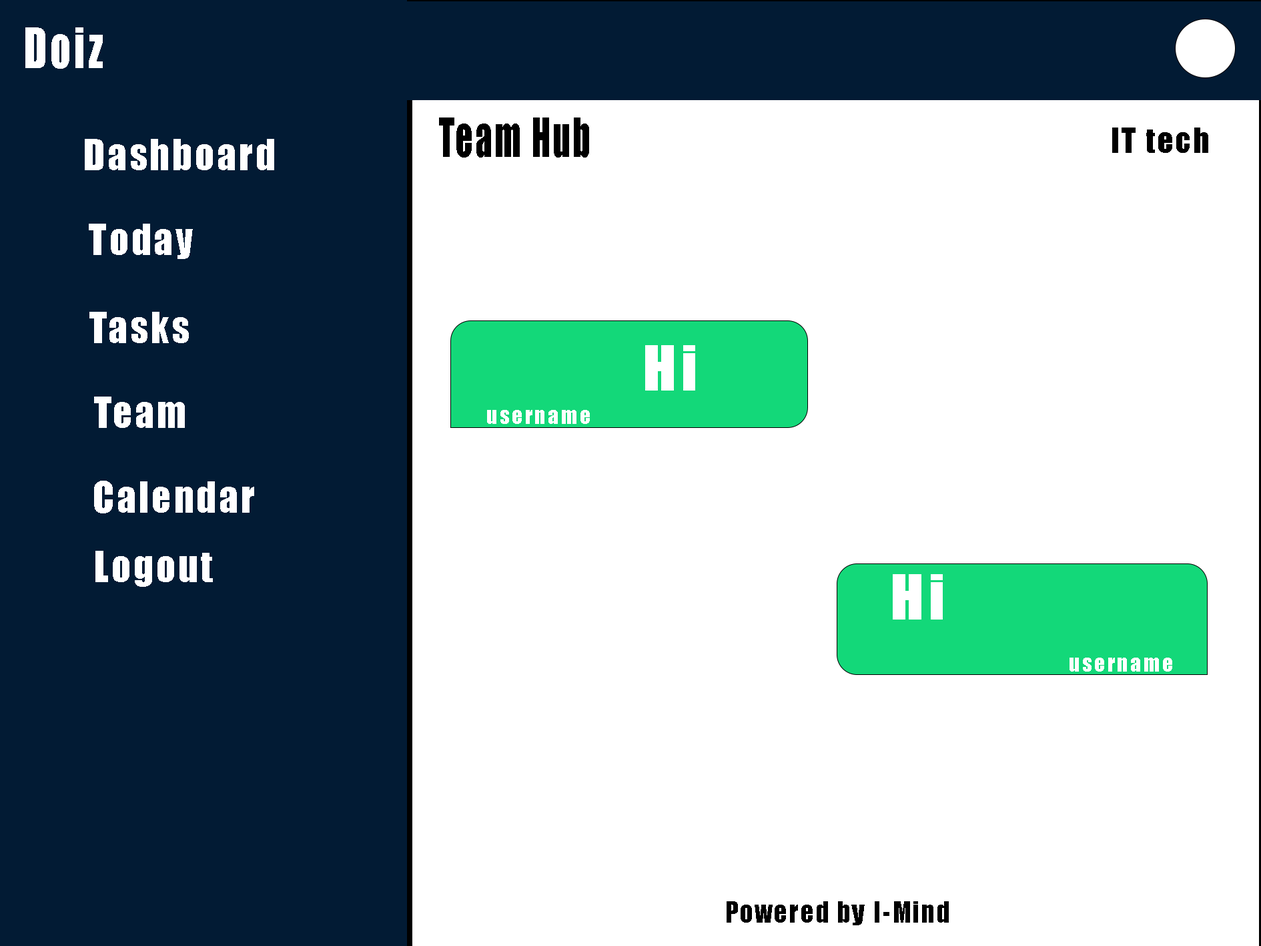
<style>
.page{position:relative;width:1261px;height:946px;background:#ffffff}
.page>*{position:absolute;margin:0}
.t1{font:51.6px "Impact";letter-spacing:0.075em;color:#ffffff;scale:0.8 1}
.t2{font:50px "Impact";letter-spacing:0.075em;color:#000000;scale:0.67 1}
.t3{font:32px "Impact";letter-spacing:0.075em;color:#000000;scale:0.96 1}
.t4{font:40.2px "Impact";letter-spacing:0.075em;color:#ffffff;scale:0.94 1}
.t5{font:57.2px "Impact";letter-spacing:0.075em;color:#ffffff;scale:1.05 1}
.t6{font:22.2px "Impact";letter-spacing:0.075em;color:#ffffff}
.t7{font:40.3px "Impact";letter-spacing:0.075em;color:#ffffff;scale:0.94 1}
.t8{font:27.1px "Impact";letter-spacing:0.075em;color:#000000;scale:0.95 1}
</style>
<div class="page">
<p class="t1" style="left:25px;top:27px;width:78px;height:42px">Doiz</p>
<p class="t2" style="left:439px;top:117px;width:150px;height:40px">Team Hub</p>
<p class="t3" style="left:1112px;top:127px;width:96px;height:26px">IT tech</p>
<p class="t4" style="left:85px;top:139px;width:189px;height:31px">Dashboard</p>
<p class="t4" style="left:89px;top:224px;width:104px;height:35px">Today</p>
<p class="t4" style="left:89px;top:312px;width:100px;height:31px">Tasks</p>
<p class="t5" style="left:645px;top:345px;width:50px;height:45px">Hi</p>
<p class="t4" style="left:94px;top:396px;width:91px;height:32px">Team</p>
<p class="t6" style="left:487px;top:410px;width:103px;height:14px">username</p>
<p class="t4" style="left:94px;top:480px;width:160px;height:33px">Calendar</p>
<p class="t7" style="left:95px;top:550px;width:118px;height:37px">Logout</p>
<p class="t5" style="left:893px;top:574px;width:50px;height:45px">Hi</p>
<p class="t6" style="left:1070px;top:657px;width:102px;height:14px">username</p>
<p class="t8" style="left:727px;top:901px;width:222px;height:24px">Powered by I-Mind</p>
</div>
